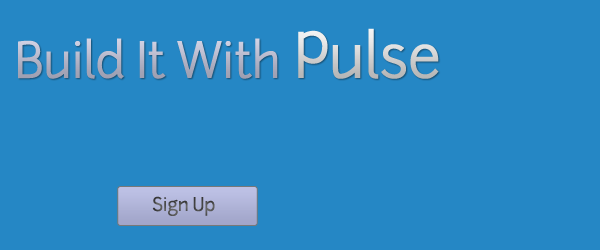
<style>
.page{position:relative;width:600px;height:250px;background:#2587c5}
.page>*{position:absolute;margin:0}
.t1{font:48px "Junction";letter-spacing:-0.025em}
.t2{font:60px "Junction";letter-spacing:-0.025em}
.t3{font:18px "Junction";letter-spacing:-0.025em;color:#4f4f4f}
</style>
<div class="page">
<p class="t1" style="left:18px;top:28px;width:421px;height:51px">Build It With<span class="t2"> Pulse</span></p>
<p class="t3" style="left:152px;top:196px;width:63px;height:20px">Sign Up</p>
</div>
